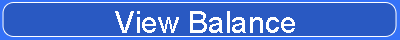
<style>
.page{position:relative;width:400px;height:40px;background:#2959c2}
.page>*{position:absolute;margin:0}
.t1{font:30px "ArialMT";color:#ffffff}
</style>
<div class="page">
<p class="t1" style="left:115px;top:11px;width:180px;height:22px">View Balance</p>
</div>
